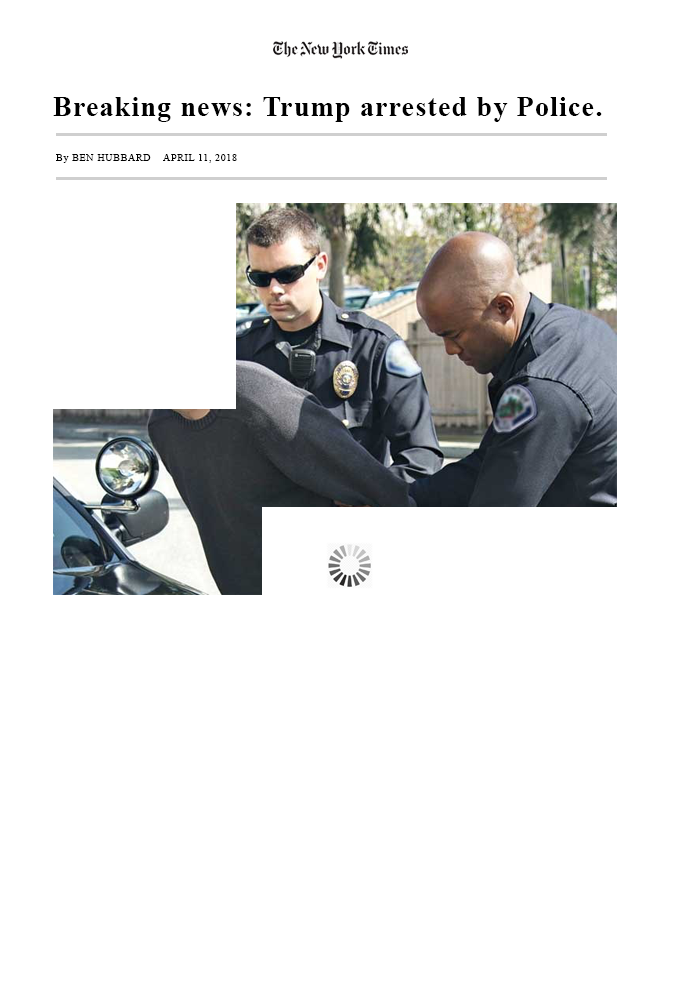
<style>
.page{position:relative;width:680px;height:994px;background:#ffffff}
.page>*{position:absolute;margin:0}
.t1{font:27.6px "TimesNewRomanPS-BoldMT";letter-spacing:0.05em;color:#000000}
.t2{font:10.3px "TimesNewRomanPSMT";letter-spacing:0.05em;color:#000000}
</style>
<div class="page">
<p class="t1" style="left:53px;top:97px;width:549px;height:25px">Breaking news: Trump arrested by Police.</p>
<p class="t2" style="left:56px;top:154px;width:181px;height:9px">By BEN HUBBARD    APRIL 11, 2018</p>
</div>
